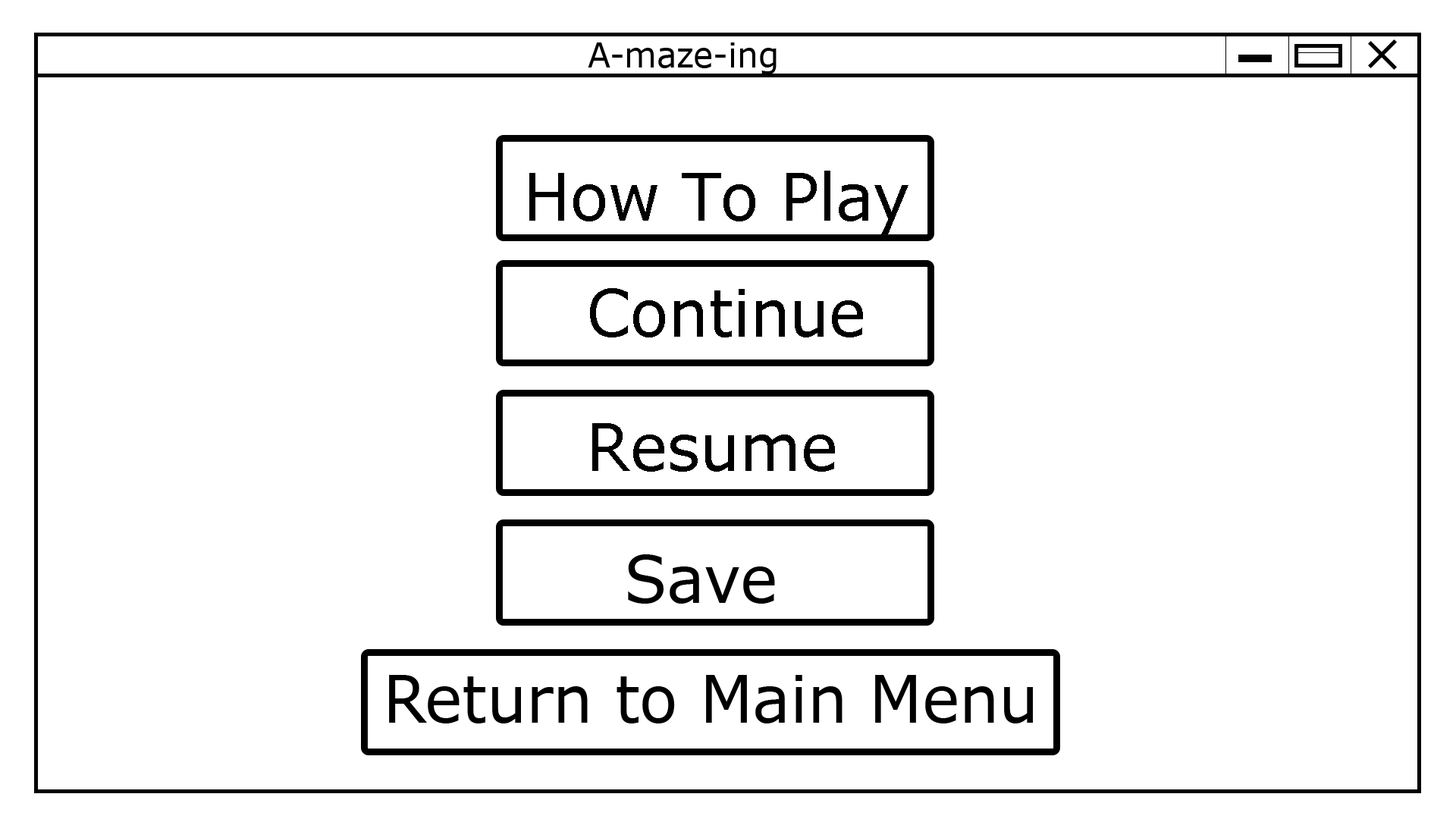
<style>
.page{position:relative;width:1456px;height:819px;background:#ffffff}
.page>*{position:absolute;margin:0}
.t1{font:34.7px "Verdana";color:#000000;scale:0.95 1}
.t2{font:66px "Verdana";color:#000000;scale:0.95 1}
</style>
<div class="page">
<p class="t1" style="left:588px;top:42px;width:189px;height:32px">A-maze-ing</p>
<p class="t2" style="left:529px;top:171px;width:379px;height:63px">How To Play</p>
<p class="t2" style="left:590px;top:288px;width:273px;height:49px">Continue</p>
<p class="t2" style="left:592px;top:423px;width:243px;height:49px">Resume</p>
<p class="t2" style="left:628px;top:554px;width:147px;height:50px">Save</p>
<p class="t2" style="left:389px;top:675px;width:644px;height:48px">Return to Main Menu</p>
</div>
